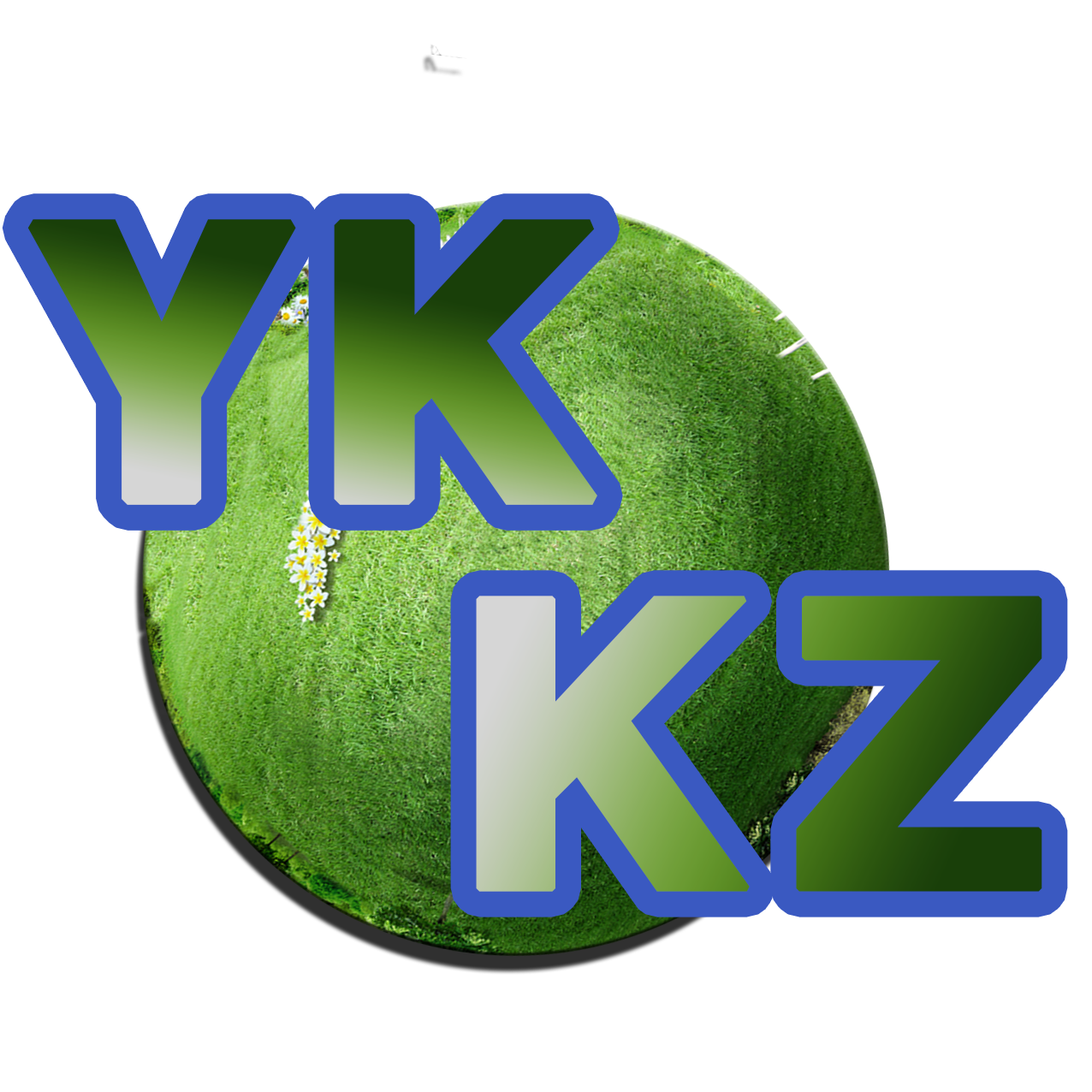
<style>
.page{position:relative;width:1092px;height:1092px;background:#ffffff}
.page>*{position:absolute;margin:0}
.t1{font:380.2px "Swiss721BT-Heavy";letter-spacing:0.042em;font-weight:bold}
.t2{font:402px "Swiss721BT-Heavy";letter-spacing:0.08em;font-weight:bold}
</style>
<div class="page">
<p class="t1" style="left:27px;top:219px;width:570px;height:286px">YK</p>
<p class="t2" style="left:476px;top:596px;width:566px;height:296px">KZ</p>
</div>
